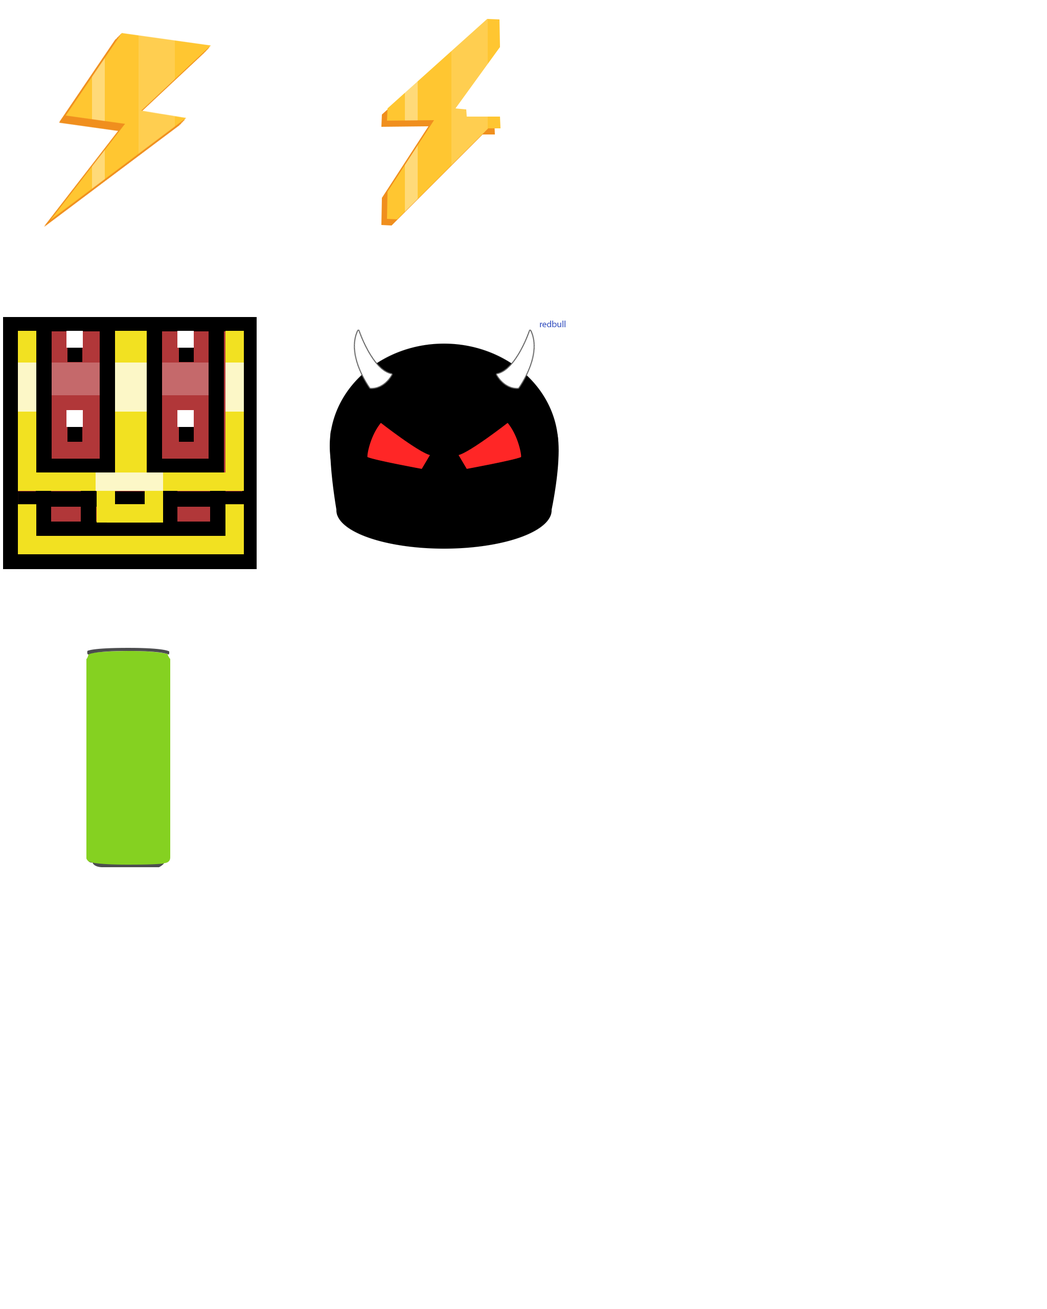
<style>
.page{position:relative;width:1047px;height:1309px;background:#ffffff}
.page>*{position:absolute;margin:0}
.t1{font:9px "MyriadPro-Regular";color:#3c59c5}
</style>
<div class="page">
<p class="t1" style="left:540px;top:321px;width:26px;height:6px">redbull</p>
</div>
